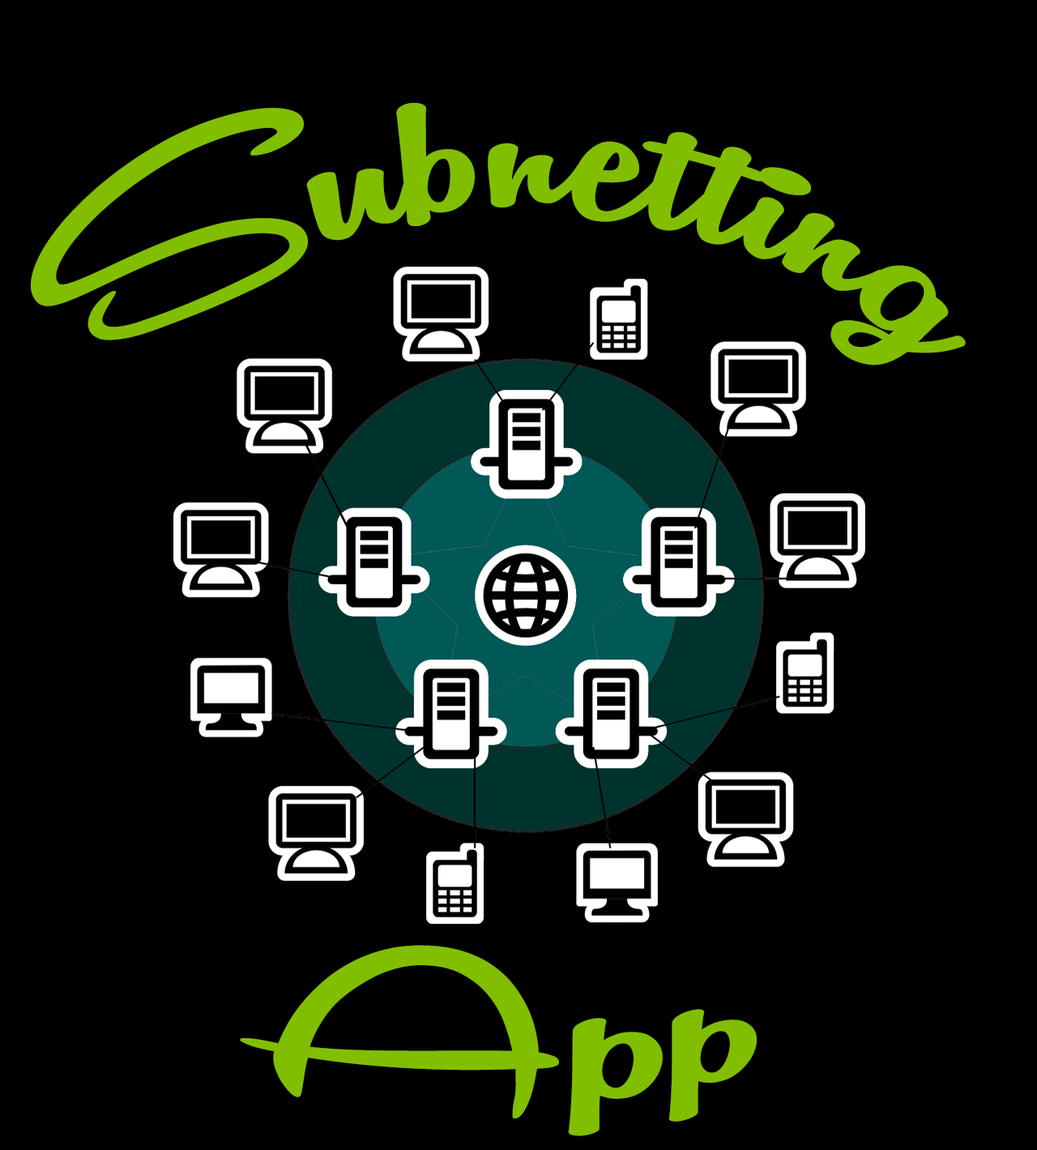
<style>
.page{position:relative;width:1037px;height:1150px;background:#000000}
.page>*{position:absolute;margin:0}
.t1{font:241.2px "RemachineScriptPersonalUseOnly";color:#82be00;scale:1.04 1}
.t2{font:215.9px "RemachineScriptPersonalUseOnly";color:#82be00;scale:1.96 1}
</style>
<div class="page">
<p class="t1" style="left:31px;top:103px;width:935px;height:262px">Subnetting</p>
<p class="t2" style="left:240px;top:945px;width:517px;height:191px">App</p>
</div>
